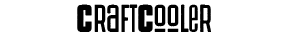
<style>
.page{position:relative;width:297px;height:37px;background:#ffffff}
.page>*{position:absolute;margin:0}
.t1{font:29.2px "hErMaNoAlTOUnIcaSe";color:#000000}
</style>
<div class="page">
<p class="t1" style="left:77px;top:4px;width:134px;height:28px">CraftCooler</p>
</div>
